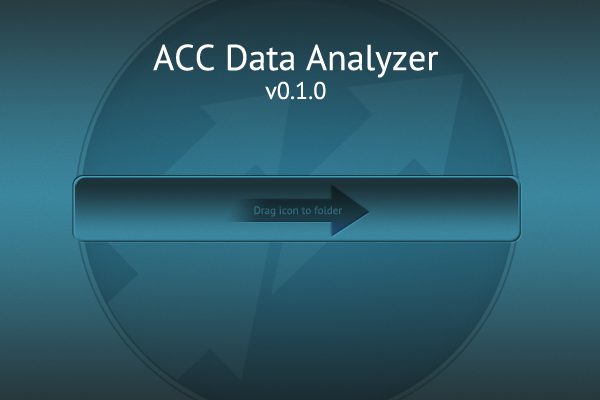
<style>
.page{position:relative;width:600px;height:400px}
.page>*{position:absolute;margin:0}
.t1{font:36px "PTSans-Regular";color:#ffffff}
.t2{font:24px "PTSans-Regular";color:#ffffff}
.t3{font:11px "PTSans-Regular";color:#316778}
</style>
<div class="page">
<p class="t1" style="left:153px;top:44px;width:286px;height:56px;text-align:center">ACC Data Analyzer<br><span class="t2">v0.1.0</span></p>
<p class="t3" style="left:254px;top:206px;width:88px;height:11px">Drag icon to folder</p>
</div>
